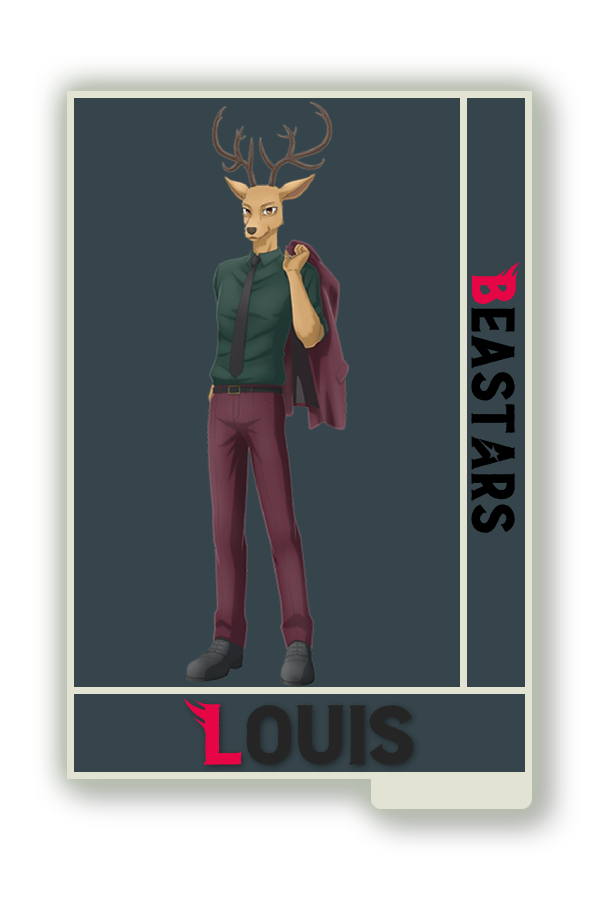
<style>
.page{position:relative;width:600px;height:900px;background:#36454b}
.page>*{position:absolute;margin:0}
.t1{font:48.8px "BEAST";color:#000000}
.t2{font:48.8px "BEAST";color:#e60646}
.t3{font:67px "BEAST";color:#252525;scale:1.12 1}
.t4{font:67px "BEAST";color:#e60646;scale:1.12 1}
</style>
<div class="page">
<p class="t1" style="left:471px;top:262px;width:50px;height:271px;rotate:90deg"><span class="t2">B</span>east@rs</p>
<p class="t3" style="left:184px;top:698px;width:230px;height:67px"><span class="t4">L</span>ouis</p>
</div>
